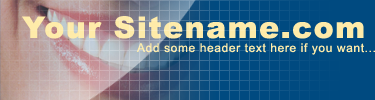
<style>
.page{position:relative;width:375px;height:100px;background:#004a80}
.page>*{position:absolute;margin:0}
.t1{font:30px "Arial-Black";letter-spacing:0.05em;color:#feeba9}
.t2{font:12px "ArialMT";letter-spacing:0.05em;color:#feeba9}
</style>
<div class="page">
<p class="t1" style="left:22px;top:16px;width:342px;height:23px">Your Sitename.com</p>
<p class="t2" style="left:136px;top:43px;width:239px;height:12px">Add some header text here if you want...</p>
</div>
